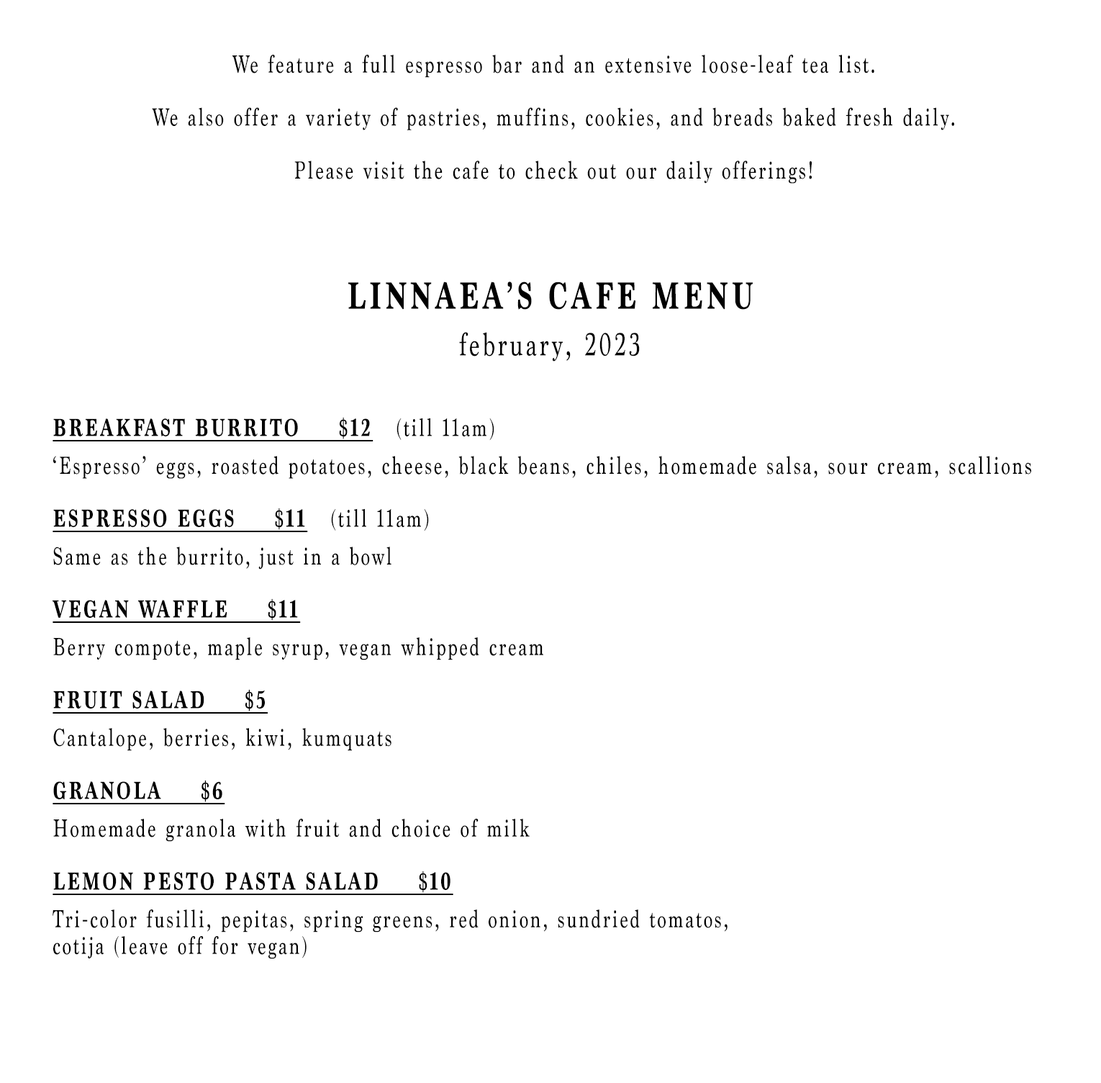
<style>
.page{position:relative;width:1101px;height:1083px;background:#ffffff}
.page>*{position:absolute;margin:0}
.t1{font:25.7px/26.5px "Marion-Regular";letter-spacing:0.12em;color:#000000;scale:0.73 1}
.t2{font:39.6px/26.5px "Marion-Bold";letter-spacing:0.12em;color:#000000;scale:0.73 1}
.t3{font:33.5px/20.2px "Marion-Regular";letter-spacing:0.12em;color:#000000;scale:0.73 1}
.t4{font:25.7px/26.5px "Marion-Bold";letter-spacing:0.12em;color:#000000;text-decoration:underline;scale:0.73 1}
</style>
<div class="page">
<p class="t1" style="left:152px;top:55px;width:803px;height:129px;text-align:center">We feature a full espresso bar and an extensive loose-leaf tea list.<br><br>We also offer a variety of pastries, muffins, cookies, and breads baked fresh daily.<br><br>Please visit the cafe to check out our daily offerings!</p>
<p class="t2" style="left:348px;top:281px;width:405px;height:80px;text-align:center">LINNAEA’S CAFE MENU<br><br><span class="t3">february, 2023</span></p>
<p class="t1" style="left:53px;top:417px;width:979px;height:542px;text-align:center"><span class="t2"><br><br></span><span class="t4">BREAKFAST BURRITO     $12</span>   (till 11am)<br><br>‘Espresso’ eggs, roasted potatoes, cheese, black beans, chiles, homemade salsa, sour cream, scallions<br><br><span class="t4">ESPRESSO EGGS     $11</span>   (till 11am)<br><br>Same as the burrito, just in a bowl<br><br><span class="t4">VEGAN WAFFLE     $11<br><br></span>Berry compote, maple syrup, vegan whipped cream<br><br><span class="t4">FRUIT SALAD     $5<br><br></span>Cantalope, berries, kiwi, kumquats<br><br><span class="t4">GRANOLA     $6<br><br></span>Homemade granola with fruit and choice of milk<br><br><span class="t4">LEMON PESTO PASTA SALAD     $10<br><br></span>Tri-color fusilli, pepitas, spring greens, red onion, sundried tomatos, <br>cotija (leave off for vegan)</p>
</div>
